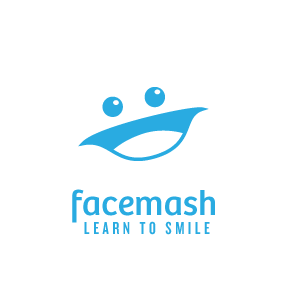
<style>
.page{position:relative;width:300px;height:300px;background:#ffffff}
.page>*{position:absolute;margin:0}
.t1{font:36px "Bree-Regular";color:#29abe1}
.t2{font:18px "Knockout-HTF48-Featherweight";letter-spacing:0.2em;color:#29abe1}
</style>
<div class="page">
<p class="t1" style="left:72px;top:189px;width:143px;height:34px">facemash</p>
<p class="t2" style="left:84px;top:221px;width:126px;height:14px">LEARN TO SMILE</p>
</div>
